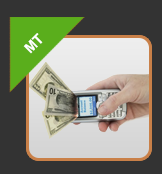
<style>
.page{position:relative;width:162px;height:174px;background:#333333}
.page>*{position:absolute;margin:0}
.t1{font:14px "Arial-BoldMT";color:#ffffff}
</style>
<div class="page">
<p class="t1" style="left:23px;top:33px;width:20px;height:21px;rotate:-45deg">MT</p>
</div>
